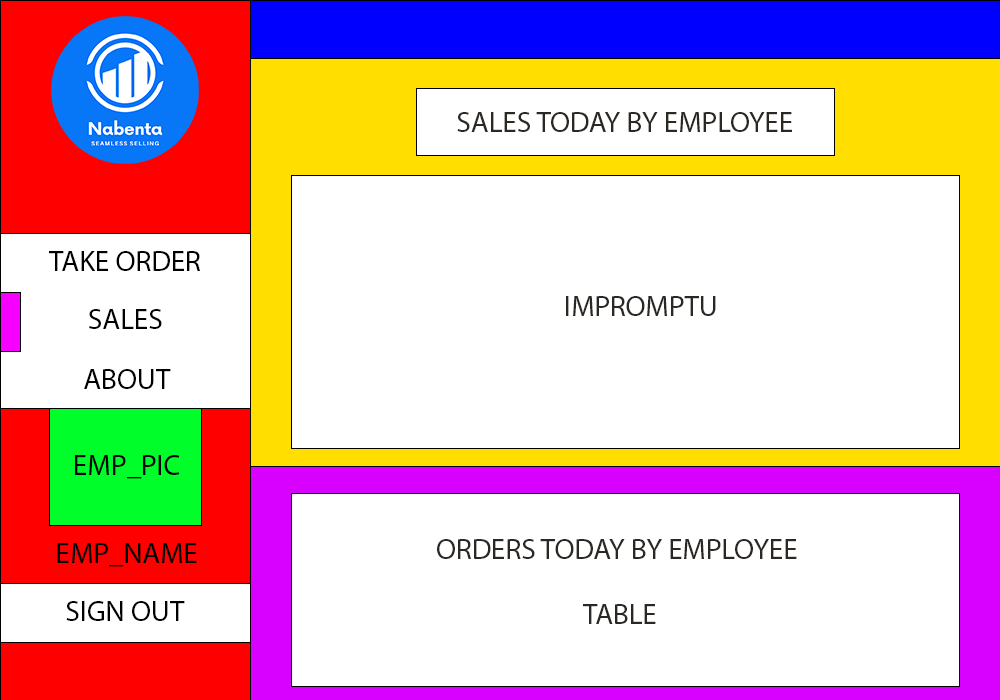
<style>
.page{position:relative;width:1000px;height:700px;background:#ffffff}
.page>*{position:absolute;margin:0}
.t1{font:29.2px "MyriadPro-Regular";color:#2b2723;text-transform:uppercase}
.t2{font:29.2px "MyriadPro-Regular";color:#000000;text-transform:uppercase}
.t3{font:29.2px/65.4px "MyriadPro-Regular";color:#2b2723;text-transform:uppercase}
</style>
<div class="page">
<p class="t1" style="left:457px;top:112px;width:335px;height:20px">sales today by employee</p>
<p class="t2" style="left:49px;top:251px;width:152px;height:20px">take order</p>
<p class="t1" style="left:566px;top:296px;width:150px;height:20px">impromptu</p>
<p class="t2" style="left:89px;top:309px;width:73px;height:20px">sales</p>
<p class="t2" style="left:84px;top:369px;width:87px;height:20px">about</p>
<p class="t2" style="left:75px;top:455px;width:105px;height:24px">emp_pic</p>
<p class="t2" style="left:57px;top:543px;width:140px;height:24px">emp_name</p>
<p class="t3" style="left:437px;top:539px;width:360px;height:85px;text-align:center">orders today by employee <br>table</p>
<p class="t2" style="left:66px;top:601px;width:119px;height:20px">Sign out</p>
</div>
